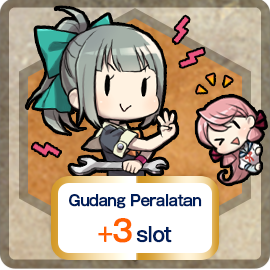
<style>
.page{position:relative;width:270px;height:270px}
.page>*{position:absolute;margin:0}
.t1{font:15px "GothicMB101Pro-Medium";letter-spacing:-0.04em;color:#001d59;font-weight:bold;scale:0.9 1}
.t2{font:20px "GothicMB101Pro-Medium";letter-spacing:-0.04em;color:#ff6000;font-weight:bold;scale:0.9 1}
.t3{font:30px "GothicMB101Pro-Medium";letter-spacing:-0.04em;color:#ff6000;font-weight:bold;scale:0.9 1}
.t4{font:20px "GothicMB101Pro-Medium";letter-spacing:-0.04em;color:#001d59;font-weight:bold;scale:0.9 1}
</style>
<div class="page">
<p class="t1" style="left:69px;top:194px;width:133px;height:49px;text-align:center">Gudang Peralatan<br><span class="t2">+</span><span class="t3">3 </span><span class="t4">slot</span></p>
</div>
